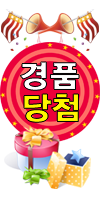
<style>
.page{position:relative;width:100px;height:199px;background:#ffffff}
.page>*{position:absolute;margin:0}
.t1{font:31px "YDIYGO350";color:#ffffff;font-weight:bold}
.t2{font:31px "YDIYGO350";color:#fff600;font-weight:bold}
</style>
<div class="page">
<p class="t1" style="left:20px;top:62px;width:27px;height:29px">경</p>
<p class="t1" style="left:50px;top:62px;width:29px;height:28px">품</p>
<p class="t2" style="left:24px;top:94px;width:28px;height:29px">당</p>
<p class="t2" style="left:51px;top:93px;width:28px;height:29px">첨</p>
</div>
